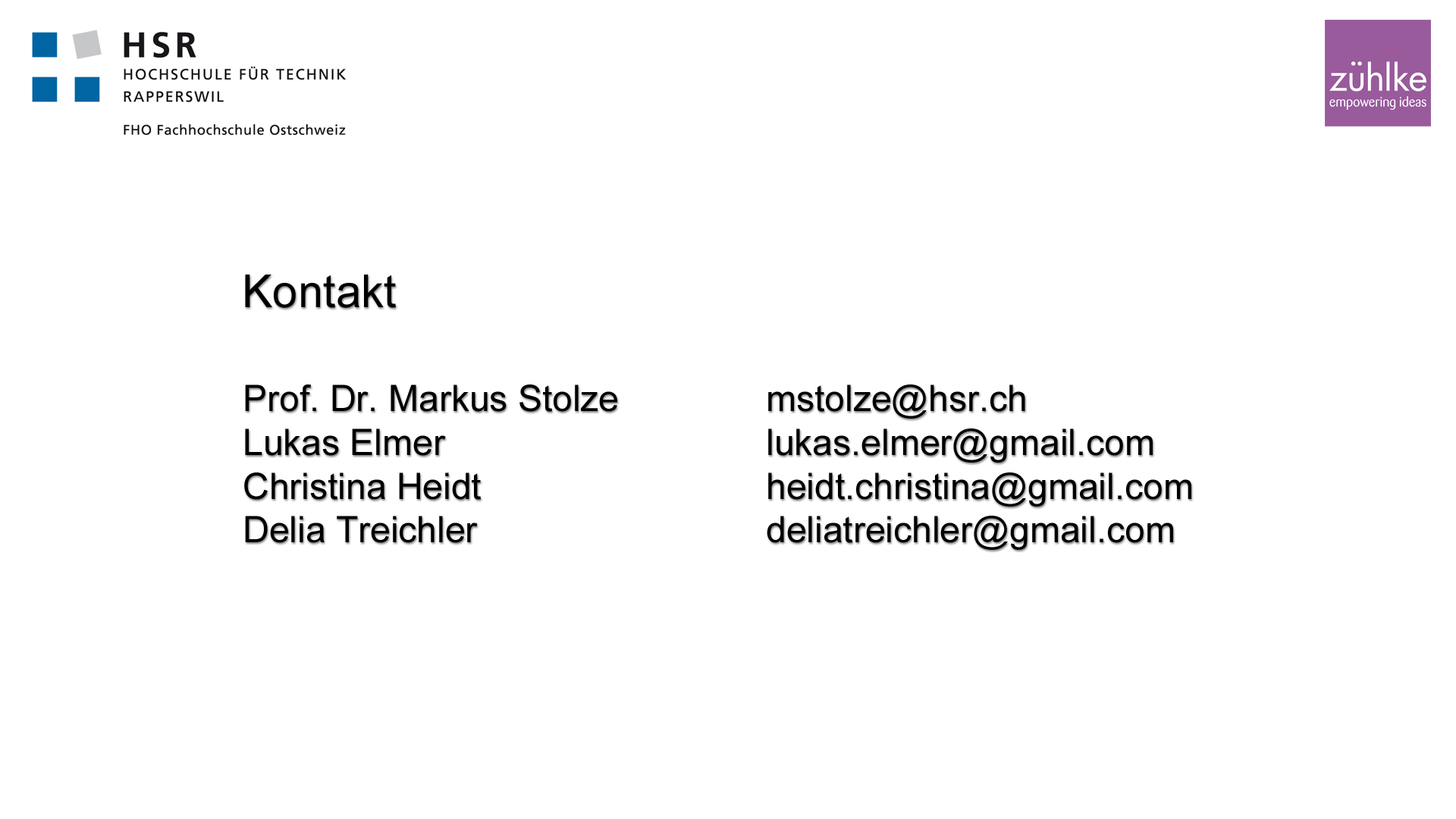
<style>
.page{position:relative;width:1456px;height:819px;background:#ffffff}
.page>*{position:absolute;margin:0}
.t1{font:45.5px "ArialMT";color:#000000}
.t2{font:36.4px "ArialMT";color:#000000}
</style>
<div class="page">
<p class="t1" style="left:245px;top:275px;width:151px;height:33px">Kontakt</p>
<p class="t2" style="left:244px;top:384px;width:373px;height:159px">Prof. Dr. Markus Stolze<br>Lukas Elmer<br>Christina Heidt<br>Delia Treichler</p>
<p class="t2" style="left:767px;top:384px;width:424px;height:166px">mstolze@hsr.ch<br>lukas.elmer@gmail.com<br>heidt.christina@gmail.com<br>deliatreichler@gmail.com</p>
</div>
